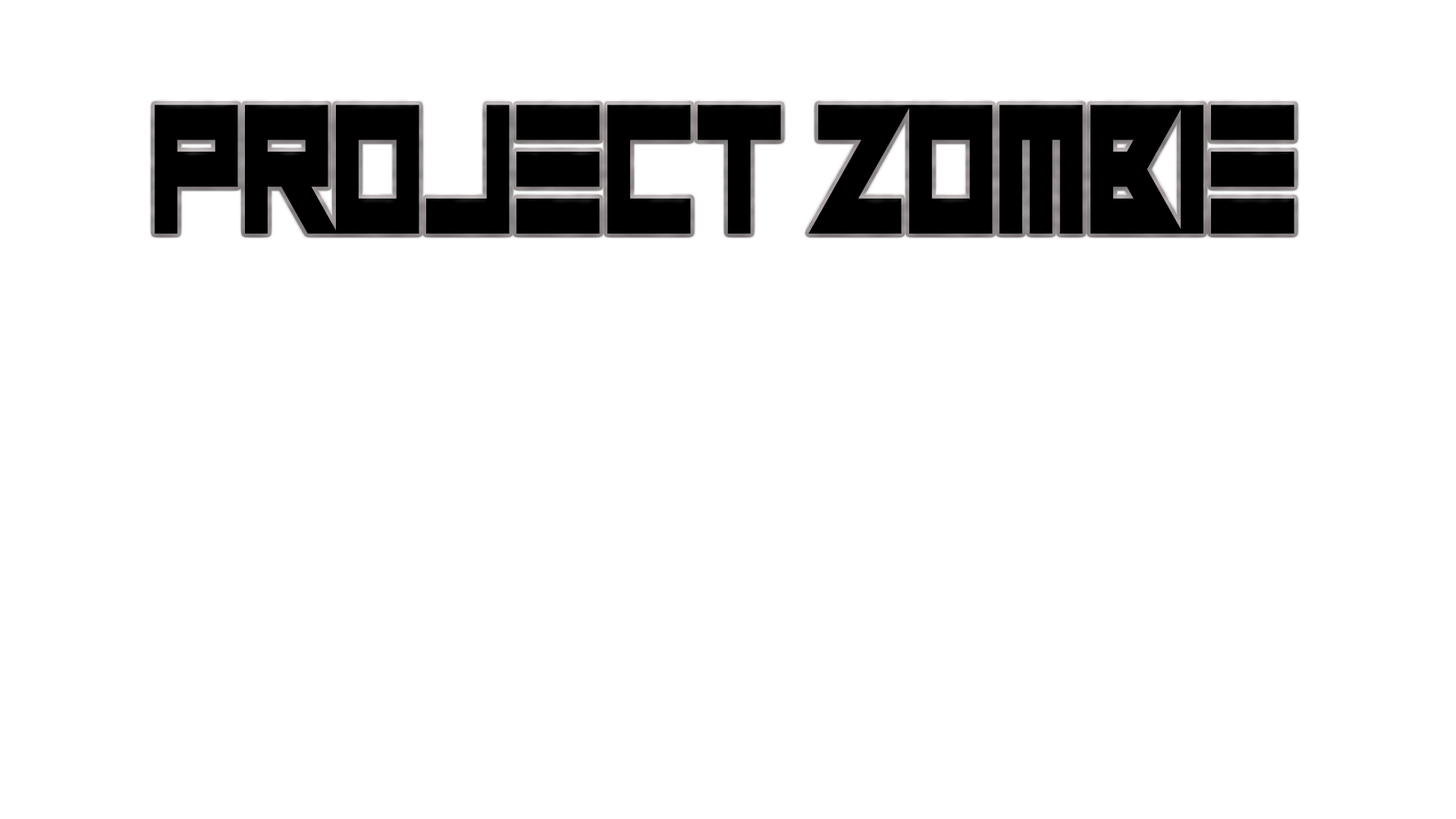
<style>
.page{position:relative;width:1456px;height:819px;background:#ffffff}
.page>*{position:absolute;margin:0}
.t1{font:239.3px "CloseandOpen";color:#000000;scale:0.65 1}
</style>
<div class="page">
<p class="t1" style="left:155px;top:105px;width:1139px;height:129px">Project zombie</p>
</div>
